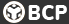
<style>
.page{position:relative;width:69px;height:24px;background:#333333}
.page>*{position:absolute;margin:0}
.t1{font:21.7px "Nunito-Black";color:#ffffff;scale:0.89 1}
</style>
<div class="page">
<p class="t1" style="left:28px;top:5px;width:39px;height:15px">BCP</p>
</div>
